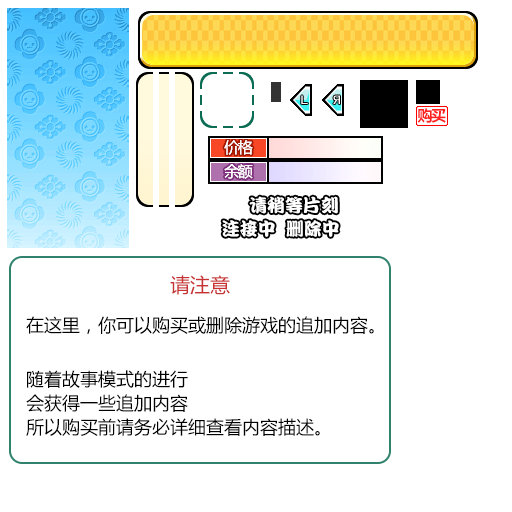
<style>
.page{position:relative;width:512px;height:512px;background:#ffffff}
.page>*{position:absolute;margin:0}
.t1{font:15px "MicrosoftYaHei-Bold";letter-spacing:-0.1em;color:#ff2222}
.t2{font:15px "MicrosoftYaHei";letter-spacing:-0.1em;color:#fffefe}
.t3{font:18px "DFPKanTingLiuW9";color:#ffffff}
.t4{font:20px "MicrosoftYaHei";color:#c83232}
.t5{font:18px/24px "MicrosoftYaHei";color:#000000}
.t6{font:18px/18px "MicrosoftYaHei";color:#000000}
</style>
<div class="page">
<p class="t1" style="left:417px;top:108px;width:29px;height:15px">购买</p>
<p class="t2" style="left:224px;top:140px;width:29px;height:15px">价格</p>
<p class="t2" style="left:224px;top:140px;width:29px;height:15px">价格</p>
<p class="t2" style="left:224px;top:164px;width:29px;height:15px">余额</p>
<p class="t2" style="left:224px;top:164px;width:29px;height:15px">余额</p>
<p class="t3" style="left:249px;top:196px;width:89px;height:18px">请稍等片刻</p>
<p class="t3" style="left:222px;top:220px;width:53px;height:17px">连接中</p>
<p class="t3" style="left:286px;top:220px;width:53px;height:17px">删除中</p>
<p class="t4" style="left:170px;top:275px;width:60px;height:20px">请注意</p>
<p class="t5" style="left:26px;top:316px;width:348px;height:120px"><span class="t6">在这里，你可以购买或删除游戏的追加内容。<br><br><br></span>随着故事模式的进行<br>会获得一些追加内容<br>所以购买前请务必详细查看内容描述。</p>
</div>
